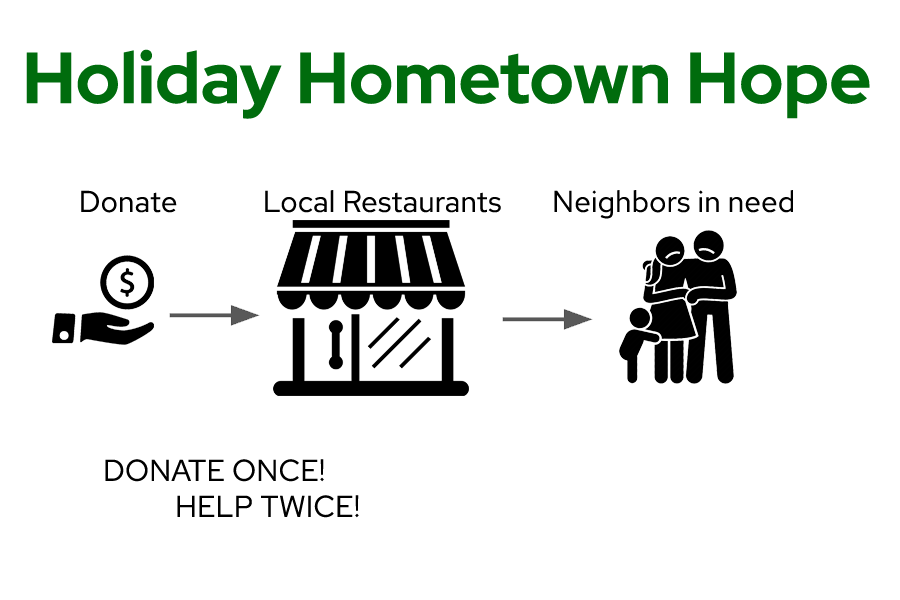
<style>
.page{position:relative;width:900px;height:600px;background:#ffffff}
.page>*{position:absolute;margin:0}
.t1{font:72px "RedHatDisplay-Bold";color:#006c0d}
.t2{font:30px "RedHatText-Regular";color:#000000}
</style>
<div class="page">
<p class="t1" style="left:26px;top:49px;width:844px;height:70px">Holiday Hometown Hope</p>
<p class="t2" style="left:81px;top:190px;width:96px;height:23px">Donate</p>
<p class="t2" style="left:265px;top:190px;width:236px;height:23px">Local Restaurants</p>
<p class="t2" style="left:554px;top:190px;width:239px;height:29px">Neighbors in need</p>
<p class="t2" style="left:105px;top:459px;width:254px;height:59px">DONATE ONCE!<br>  HELP TWICE!</p>
</div>
